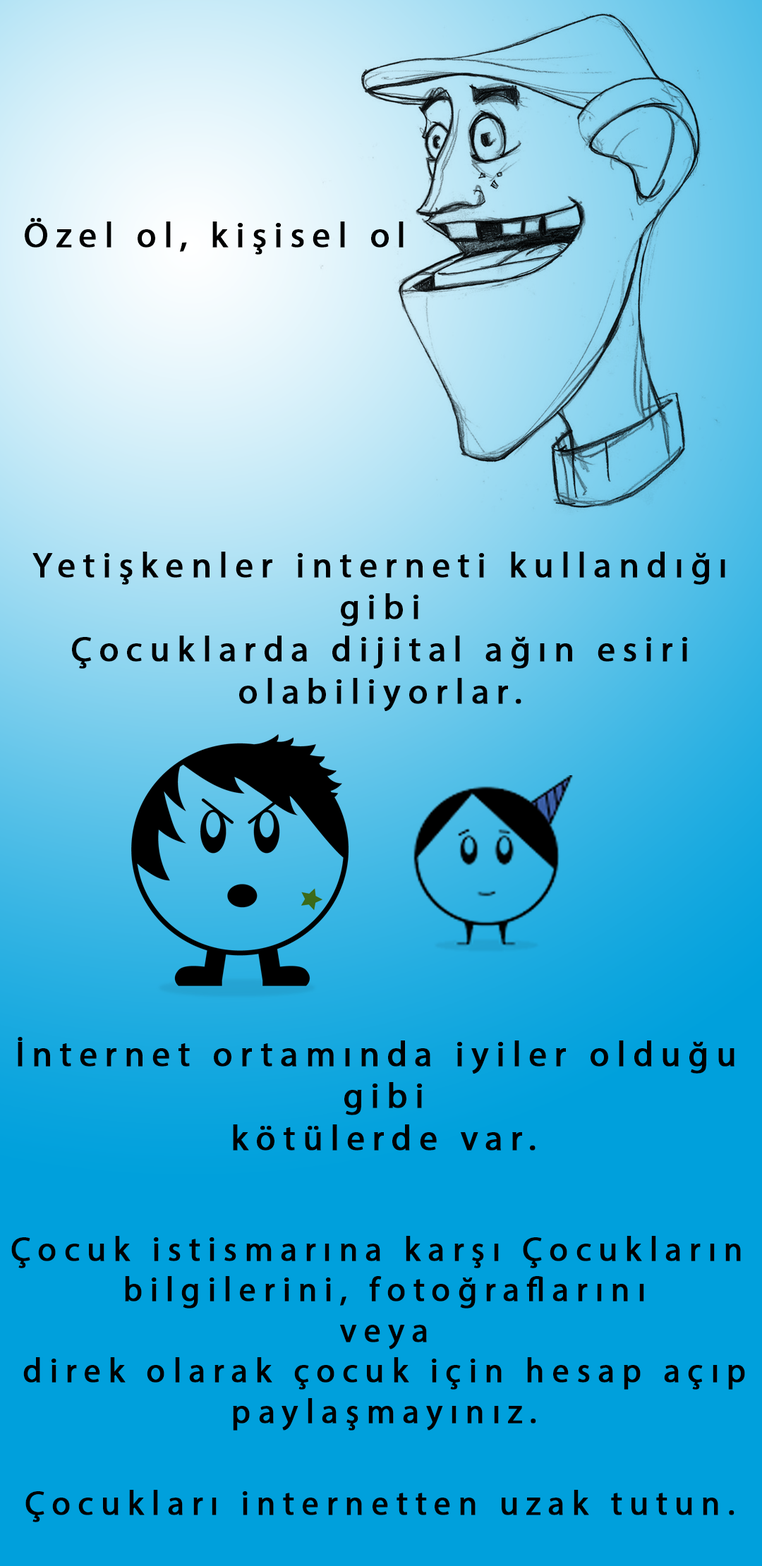
<style>
.page{position:relative;width:762px;height:1566px;background:#00a0dc}
.page>*{position:absolute;margin:0}
.t1{font:35.3px "MyriadPro-Regular";letter-spacing:0.2em;color:#000000;font-weight:bold}
.t2{font:33.9px "MyriadPro-Regular";letter-spacing:0.2em;color:#000000;font-weight:bold}
</style>
<div class="page">
<p class="t1" style="left:25px;top:218px;width:378px;height:37px">Özel ol, kişisel ol</p>
<p class="t1" style="left:32px;top:551px;width:693px;height:160px;text-align:center">Yetişkenler interneti kullandığı<br>gibi<br>Çocuklarda dijital ağın esiri<br>olabiliyorlar.</p>
<p class="t1" style="left:18px;top:1037px;width:716px;height:113px;text-align:center">İnternet ortamında iyiler olduğu<br> gibi<br> kötülerde var.</p>
<p class="t2" style="left:11px;top:1236px;width:734px;height:194px;text-align:center">Çocuk istismarına karşı Çocukların <br>bilgilerini, fotoğraflarını<br>veya<br>direk olarak çocuk için hesap açıp<br>paylaşmayınız.</p>
<p class="t2" style="left:25px;top:1489px;width:709px;height:33px">Çocukları internetten uzak tutun.</p>
</div>
